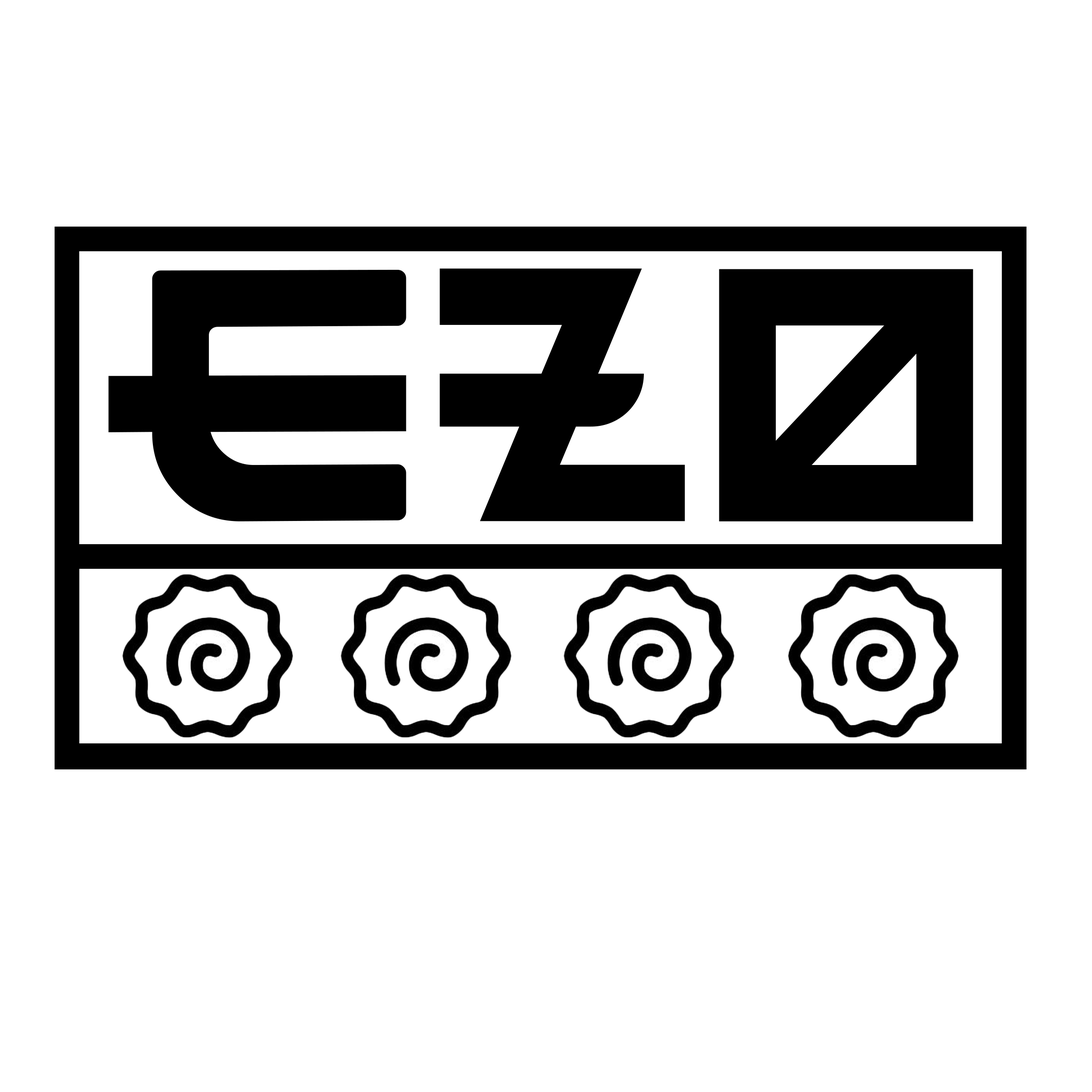
<style>
.page{position:relative;width:1092px;height:1092px;background:#ffffff}
.page>*{position:absolute;margin:0}
.t1{font:341.1px "FunnySamuraiDemoRegular";color:#000000;text-transform:uppercase}
</style>
<div class="page">
<p class="t1" style="left:108px;top:268px;width:865px;height:253px">Ezo</p>
</div>
